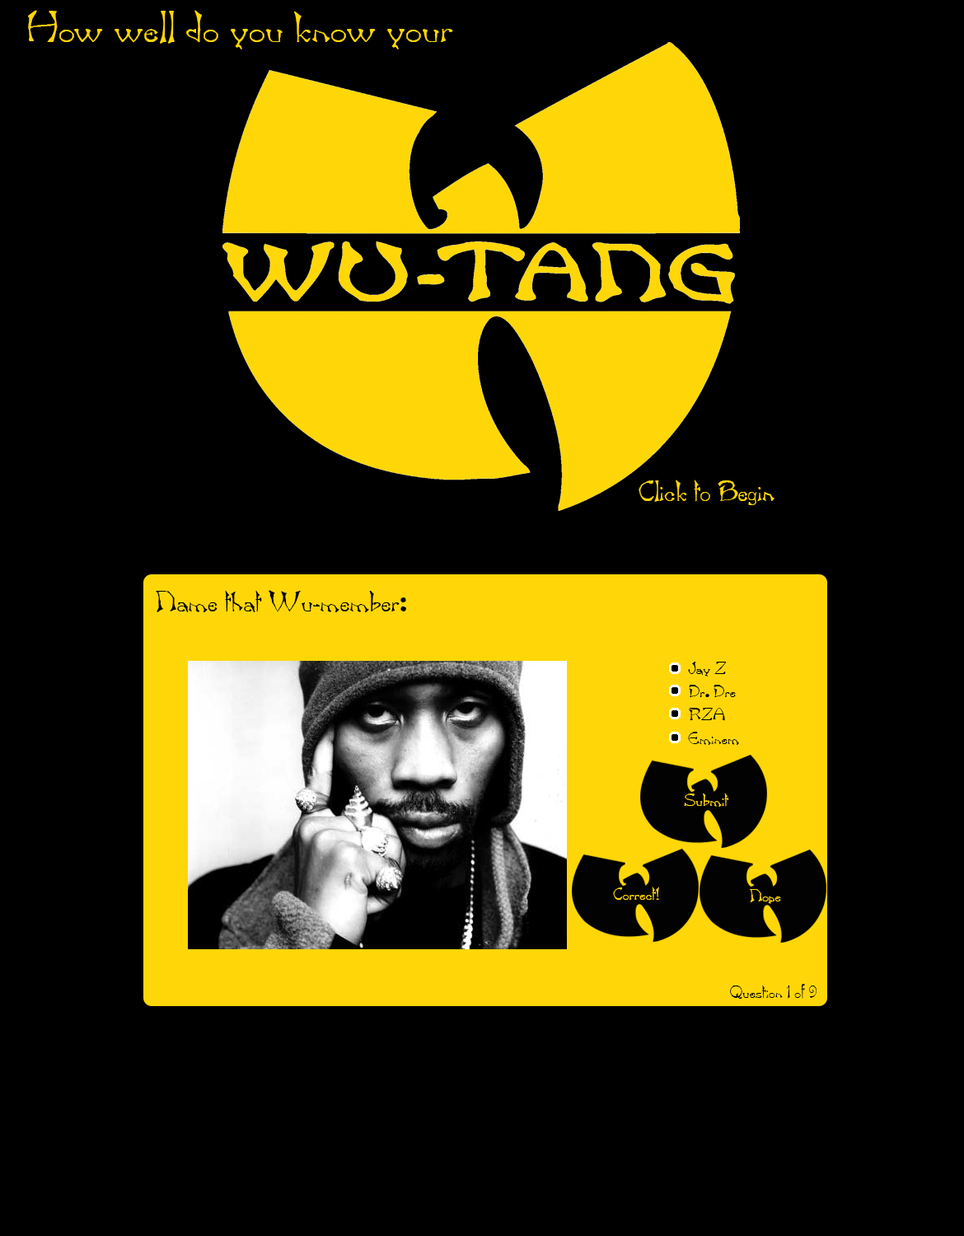
<style>
.page{position:relative;width:964px;height:1236px;background:#000000}
.page>*{position:absolute;margin:0}
.t1{font:37.9px "BambooFont";color:#ffd708}
.t2{font:24.7px "BambooFont";color:#ffd708}
.t3{font:24.7px "BambooFont";color:#000000}
.t4{font:14.8px "BambooFont";color:#000000}
</style>
<div class="page">
<p class="t1" style="left:28px;top:10px;width:425px;height:39px">How well do you know your</p>
<p class="t2" style="left:639px;top:480px;width:136px;height:25px">Click to Begin</p>
<p class="t3" style="left:156px;top:590px;width:251px;height:22px">Name that Wu-member:</p>
<p class="t4" style="left:688px;top:662px;width:39px;height:15px">Jay Z</p>
<p class="t4" style="left:689px;top:685px;width:47px;height:12px">Dr. Dre</p>
<p class="t4" style="left:689px;top:708px;width:36px;height:13px">RZA</p>
<p class="t4" style="left:688px;top:732px;width:51px;height:13px">Eminem</p>
<p class="t4" style="left:730px;top:984px;width:87px;height:15px">Question 1 of 9</p>
</div>
